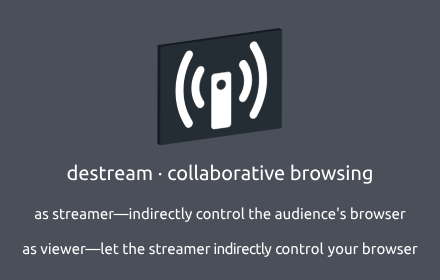
<style>
.page{position:relative;width:440px;height:280px;background:#4a4f59}
.page>*{position:absolute;margin:0}
.t1{font:20px "Ubuntu-Regular";color:#ffffff}
.t2{font:15px "Ubuntu-Regular";color:#ffffff}
</style>
<div class="page">
<p class="t1" style="left:67px;top:164px;width:305px;height:20px">destream · collaborative browsing</p>
<p class="t2" style="left:34px;top:207px;width:372px;height:15px">as streamer—indirectly control the audience's browser</p>
<p class="t2" style="left:22px;top:242px;width:396px;height:15px">as viewer—let the streamer indirectly control your browser</p>
</div>
